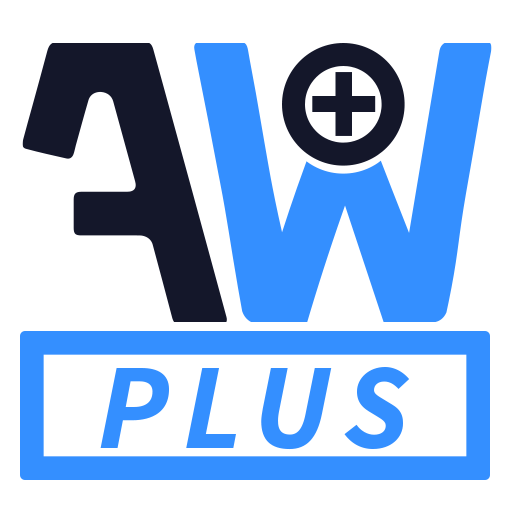
<style>
.page{position:relative;width:512px;height:512px;background:#ffffff}
.page>*{position:absolute;margin:0}
.t1{font:133px "SourceSansPro-Black";color:#14172a}
.t2{font:122px "SourceSansPro-BoldIt";letter-spacing:0.12em;color:#348fff;text-transform:uppercase}
</style>
<div class="page">
<p class="t1" style="left:312px;top:72px;width:64px;height:64px">+</p>
<p class="t2" style="left:100px;top:367px;width:310px;height:83px">Plus</p>
</div>
